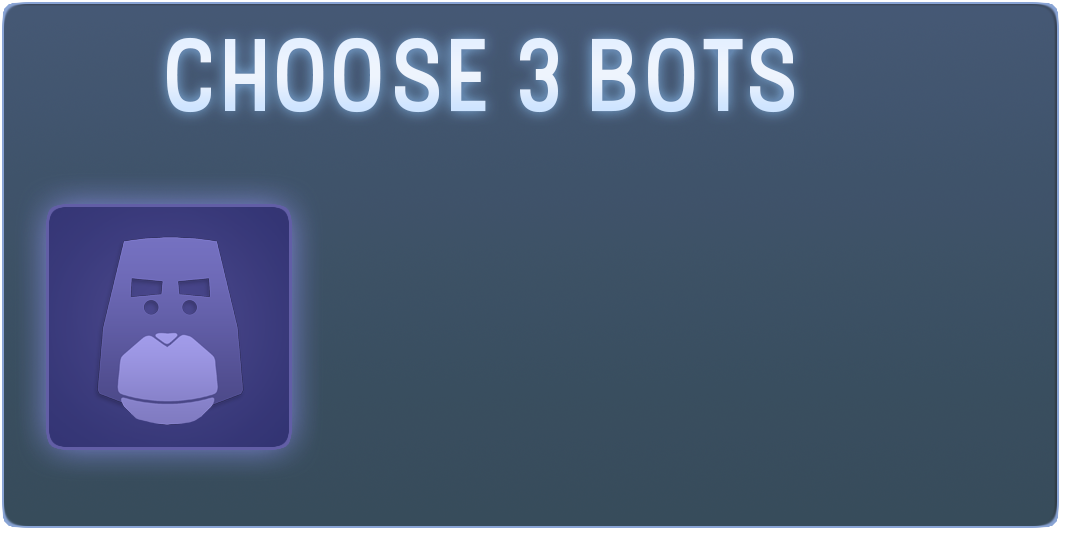
<style>
.page{position:relative;width:1065px;height:534px}
.page>*{position:absolute;margin:0}
.t1{font:102.4px "Stellar-Medium";letter-spacing:-0.005em;color:#e6f0fe}
</style>
<div class="page">
<p class="t1" style="left:167px;top:37px;width:627px;height:76px">CHOOSE 3 BOTS</p>
</div>
